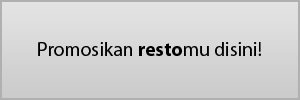
<style>
.page{position:relative;width:300px;height:100px}
.page>*{position:absolute;margin:0}
.t1{font:19.7px "MyriadPro-Regular";color:#000000}
.t2{font:19.7px "MyriadPro-Bold";color:#000000}
</style>
<div class="page">
<p class="t1" style="left:38px;top:42px;width:223px;height:14px">Promosikan <span class="t2">resto</span>mu disini!</p>
</div>
